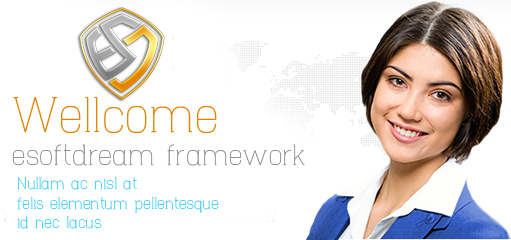
<style>
.page{position:relative;width:511px;height:240px;background:#ffffff}
.page>*{position:absolute;margin:0}
.t1{font:49.7px "HapnaMono-Light";color:#e28502}
.t2{font:29.1px "HapnaMono-Light";color:#959595}
.t3{font:16.1px "HapnaMono-Light"}
</style>
<div class="page">
<p class="t1" style="left:13px;top:97px;width:204px;height:36px">Wellcome</p>
<p class="t2" style="left:12px;top:144px;width:293px;height:22px">esoftdream framework</p>
<p class="t3" style="left:17px;top:177px;width:202px;height:52px">Nullam ac nisl at <br>felis elementum pellentesque <br>id nec lacus</p>
</div>
